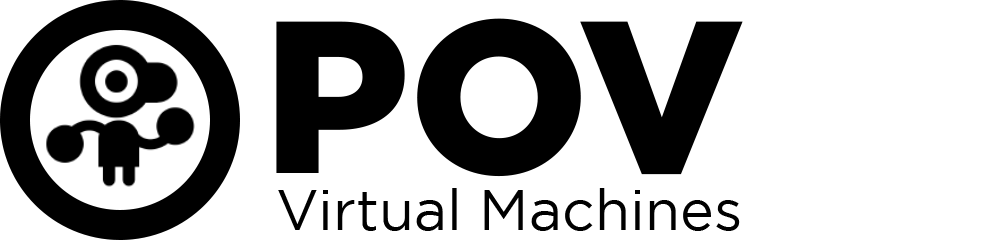
<style>
.page{position:relative;width:1000px;height:240px;background:#ffffff}
.page>*{position:absolute;margin:0}
.t1{font:216.2px "Gotham-Black";color:#000000}
.t2{font:57.2px "Gotham-Book";color:#000000}
</style>
<div class="page">
<p class="t1" style="left:276px;top:18px;width:467px;height:159px">POV</p>
<p class="t2" style="left:278px;top:188px;width:462px;height:43px">Virtual Machines</p>
</div>
